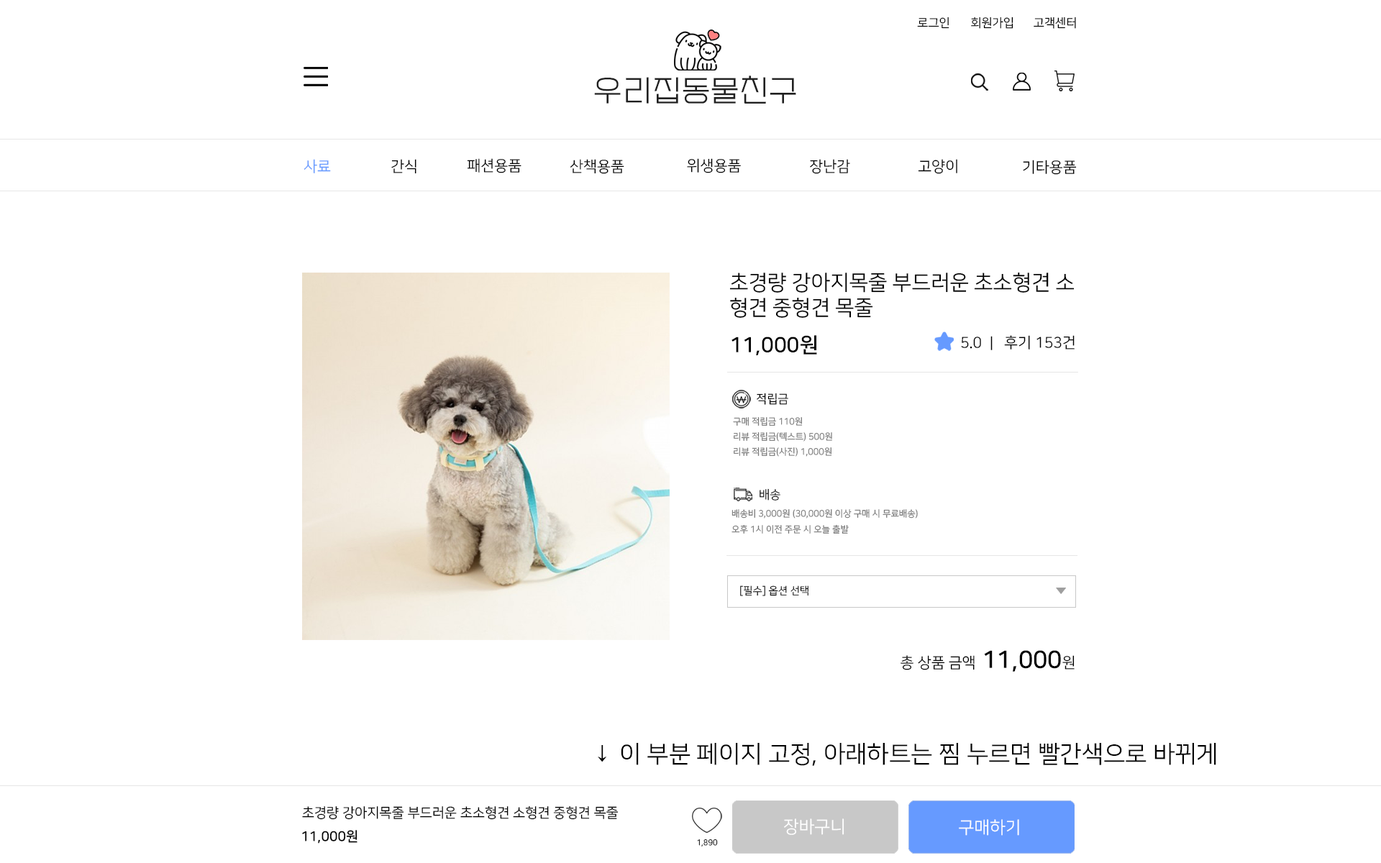
<style>
.page{position:relative;width:1381px;height:863px;background:#ffffff}
.page>*{position:absolute;margin:0}
.t1{font:12px "NanumSquareR";color:#000000}
.t2{font:30px "EF_watermelonSalad";letter-spacing:0.025em;color:#202020}
.t3{font:15px "NanumSquareR";color:#669aff}
.t4{font:15px "NanumSquareR";color:#000000}
.t5{font:21px "NanumSquareR";color:#000000}
.t6{font:21px "NanumSquareB";color:#000000}
.t7{font:9px/15px "NanumSquareR";color:#797979}
.t8{font:9px "NanumSquareR";color:#797979}
.t9{font:10.5px "NanumSquareR";color:#000000}
.t10{font:24px "NanumSquareB";color:#000000}
.t11{font:24px "NanumSquareR";color:#000000}
.t12{font:13.6px "NanumSquareR";color:#000000}
.t13{font:17.2px "NanumSquareR";color:#ffffff}
.t14{font:13.6px "NanumSquareB";color:#000000}
.t15{font:7.9px "NanumSquareR"}
</style>
<div class="page">
<p class="t1" style="left:917px;top:17px;width:33px;height:12px">로그인</p>
<p class="t1" style="left:971px;top:17px;width:43px;height:12px">회원가입</p>
<p class="t1" style="left:1034px;top:17px;width:42px;height:12px">고객센터</p>
<p class="t2" style="left:594px;top:76px;width:202px;height:28px">우리집동물친구</p>
<p class="t3" style="left:304px;top:159px;width:27px;height:14px">사료</p>
<p class="t4" style="left:391px;top:159px;width:26px;height:15px">간식</p>
<p class="t4" style="left:467px;top:158px;width:55px;height:15px">패션용품</p>
<p class="t4" style="left:570px;top:159px;width:54px;height:15px">산책용품</p>
<p class="t4" style="left:687px;top:158px;width:54px;height:15px">위생용품</p>
<p class="t4" style="left:810px;top:159px;width:40px;height:15px">장난감</p>
<p class="t4" style="left:918px;top:159px;width:40px;height:15px">고양이</p>
<p class="t4" style="left:1023px;top:160px;width:54px;height:15px">기타용품</p>
<p class="t5" style="left:729px;top:272px;width:346px;height:46px">초경량 강아지목줄 부드러운 초소형견 소<br>형견 중형견 목줄</p>
<p class="t6" style="left:732px;top:335px;width:85px;height:20px">11,000원</p>
<p class="t4" style="left:961px;top:337px;width:20px;height:12px">5.0</p>
<p class="t4" style="left:991px;top:336px;width:2px;height:14px">ㅣ</p>
<p class="t4" style="left:1004px;top:335px;width:71px;height:15px">후기 153건</p>
<p class="t1" style="left:757px;top:393px;width:31px;height:12px">적립금</p>
<p class="t7" style="left:733px;top:417px;width:99px;height:40px">구매 적립금 110원<br>리뷰 적립금(텍스트) 500원<br>리뷰 적립금(사진) 1,000원</p>
<p class="t1" style="left:760px;top:488px;width:21px;height:13px">배송</p>
<p class="t8" style="left:732px;top:509px;width:186px;height:10px">배송비 3,000원 (30,000원 이상 구매 시 무료배송)</p>
<p class="t8" style="left:732px;top:524px;width:117px;height:10px">오후 1시 이전 주문 시 오늘 출발</p>
<p class="t9" style="left:740px;top:586px;width:69px;height:10px">[필수] 옵션 선택</p>
<p class="t4" style="left:901px;top:650px;width:174px;height:22px">총 상품 금액<span class="t10"> 11,000</span>원</p>
<p class="t11" style="left:598px;top:743px;width:619px;height:23px">↓ 이 부분 페이지 고정, 아래하트는 찜 누르면 빨간색으로 바뀌게</p>
<p class="t12" style="left:302px;top:806px;width:317px;height:14px">초경량 강아지목줄 부드러운 초소형견 소형견 중형견 목줄</p>
<p class="t13" style="left:784px;top:819px;width:61px;height:16px">장바구니</p>
<p class="t13" style="left:959px;top:819px;width:60px;height:17px">구매하기</p>
<p class="t14" style="left:302px;top:830px;width:56px;height:14px">11,000원</p>
<p class="t15" style="left:697px;top:840px;width:21px;height:7px">1,890</p>
</div>
